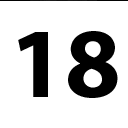
<style>
.page{position:relative;width:128px;height:128px;background:#ffffff}
.page>*{position:absolute;margin:0}
.t1{font:99.7px "MyriadHebrew-Bold";color:#000000}
</style>
<div class="page">
<p class="t1" style="left:18px;top:30px;width:100px;height:67px">18</p>
</div>
